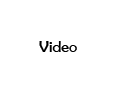
<style>
.page{position:relative;width:126px;height:95px;background:#ffffff}
.page>*{position:absolute;margin:0}
.t1{font:16px "BerlinSansFB-Reg";color:#000000}
</style>
<div class="page">
<p class="t1" style="left:39px;top:41px;width:38px;height:11px">Video</p>
</div>
